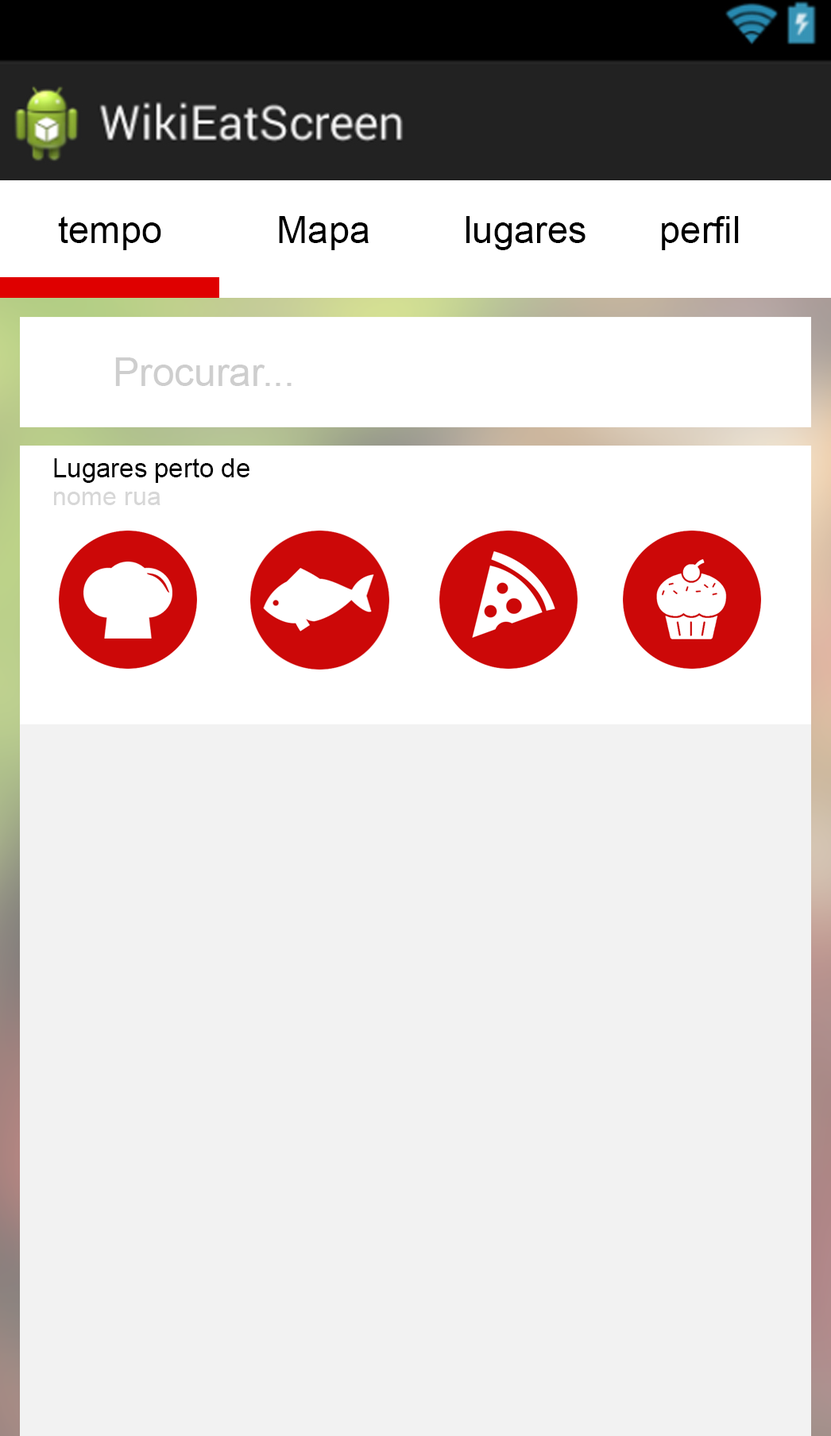
<style>
.page{position:relative;width:831px;height:1436px;background:#f2f2f2}
.page>*{position:absolute;margin:0}
.t1{font:37.6px "ArialMT";color:#000000}
.t2{font:39.6px "ArialMT";color:#cecece}
.t3{font:26.2px "ArialMT";color:#000000}
.t4{font:25.5px "ArialMT";color:#d7d7d7}
</style>
<div class="page">
<p class="t1" style="left:58px;top:216px;width:680px;height:34px">tempo           Mapa         lugares       perfil</p>
<p class="t2" style="left:115px;top:357px;width:176px;height:29px">Procurar...</p>
<p class="t3" style="left:54px;top:458px;width:195px;height:25px">Lugares perto de</p>
<p class="t4" style="left:54px;top:492px;width:106px;height:13px">nome rua</p>
</div>
